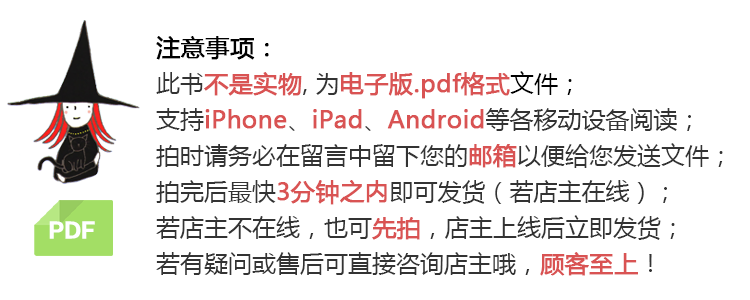
<style>
.page{position:relative;width:750px;height:300px;background:#ffffff}
.page>*{position:absolute;margin:0}
.t1{font:24px/36px "MicrosoftYaHei";color:#333333}
.t2{font:24px/36px "MicrosoftYaHei";color:#000000;font-weight:bold}
.t3{font:24px/36px "MicrosoftYaHei";color:#d95353;font-weight:bold}
.t4{font:24px/36px "MicrosoftYaHei";color:#000000}
.t5{font:20px "FZLTTHK--GBK1-0";color:#ffffff}
</style>
<div class="page">
<p class="t1" style="left:156px;top:36px;width:567px;height:240px"><span class="t2">注意事项：<br></span>此书<span class="t3">不是实物</span>, 为<span class="t3">电子版.pdf格式</span><span class="t4">文件；<br></span>支持<span class="t3">iPhone</span>、<span class="t3">iPad</span>、<span class="t3">Android</span>等各移动设备阅读；<br>拍时请务必在留言中留下您的<span class="t3">邮箱</span>以便给您发送文件；<br>拍完后最快<span class="t3">3分钟之内</span>即可发货（若店主在线）；<br>若店主不在线，也可<span class="t3">先拍</span>，店主上线后立即发货；<br>若有疑问或售后可直接咨询店主哦，<span class="t3">顾客至上</span>！</p>
<p class="t5" style="left:49px;top:221px;width:46px;height:18px">PDF</p>
</div>
